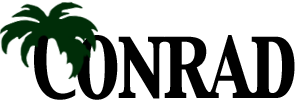
<style>
.page{position:relative;width:300px;height:100px;background:#ffffff}
.page>*{position:absolute;margin:0}
.t1{font:91.8px "CapitalsRegular";letter-spacing:-0.05em;color:#000000;scale:0.76 1}
</style>
<div class="page">
<p class="t1" style="left:34px;top:19px;width:261px;height:81px">Conrad</p>
</div>
